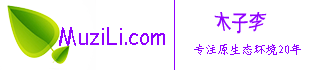
<style>
.page{position:relative;width:325px;height:70px;background:#ffffff}
.page>*{position:absolute;margin:0}
.t1{font:17px "SimHei";color:#9000ff}
.t2{font:24.5px "ComicSansMS";color:#9000ff;scale:0.86 1}
.t3{font:12px "KaiTi_GB2312";color:#9000ff}
</style>
<div class="page">
<p class="t1" style="left:214px;top:12px;width:53px;height:22px">木子李</p>
<p class="t2" style="left:59px;top:27px;width:106px;height:19px">MuziLi.com</p>
<p class="t3" style="left:194px;top:44px;width:107px;height:11px">专注原生态环境20年</p>
</div>
